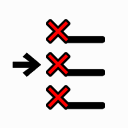
<style>
.page{position:relative;width:128px;height:128px;background:#fcfcfc}
.page>*{position:absolute;margin:0}
.t1{font:44.8px "SourceCodePro-Black";color:#000000;scale:1.14 1}
</style>
<div class="page">
<p class="t1" style="left:12px;top:52px;width:29px;height:25px">→</p>
</div>
